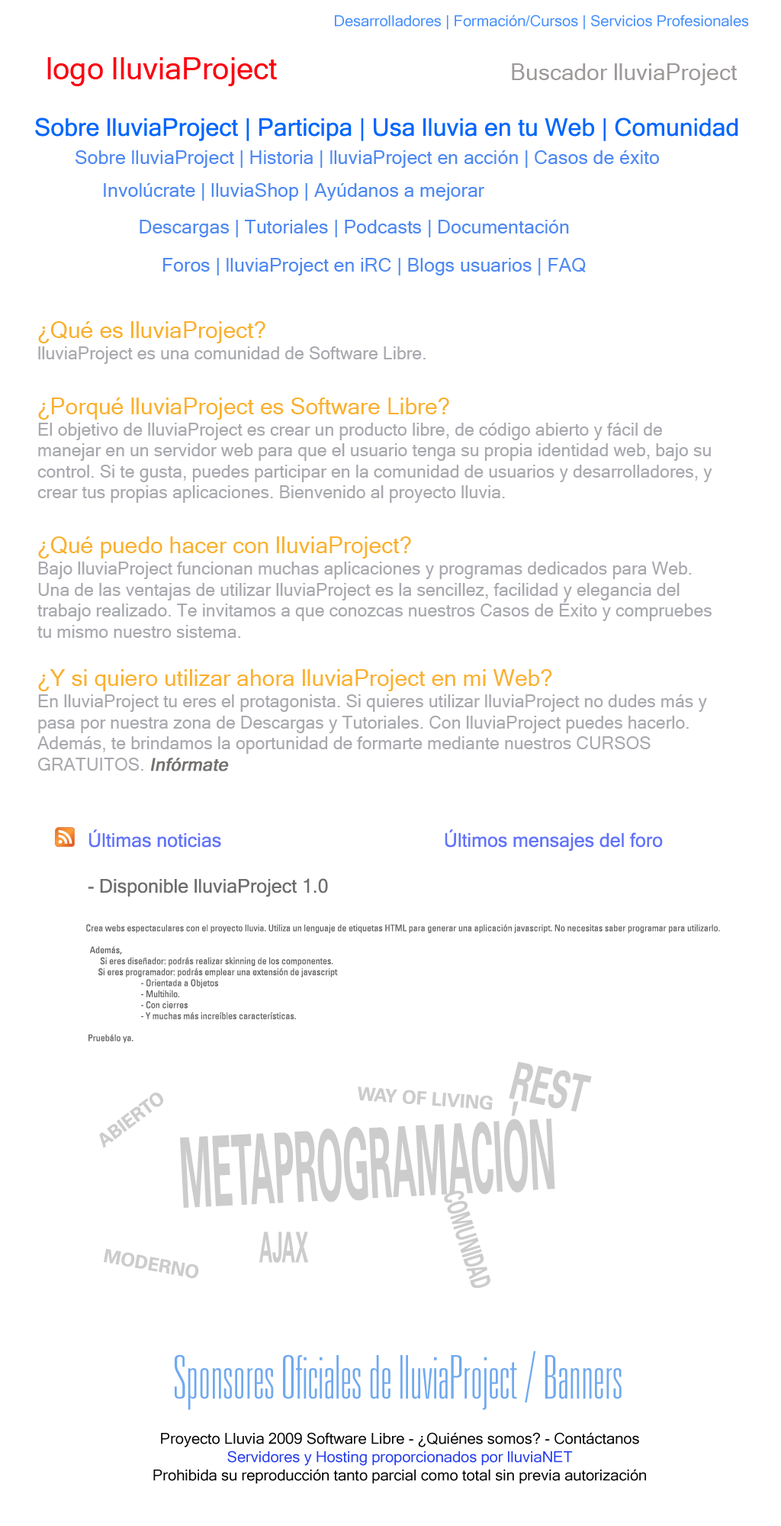
<style>
.page{position:relative;width:781px;height:1526px;background:#ffffff}
.page>*{position:absolute;margin:0}
.t1{font:15.3px "MicrosoftSansSerif";color:#428dfd}
.t2{font:30.5px "MicrosoftSansSerif";color:#fb020e}
.t3{font:22.9px "MicrosoftSansSerif";color:#9e9999}
.t4{font:24.4px "MicrosoftSansSerif";color:#0266fb}
.t5{font:19.1px "MicrosoftSansSerif";color:#4e88f1}
.t6{font:17.6px "MicrosoftSansSerif";color:#a8a9ae}
.t7{font:22.9px "MicrosoftSansSerif";color:#fab02f}
.t8{font:17.6px "MicrosoftSansSerif";color:#73716e;font-weight:bold;font-style:italic}
.t9{font:19.1px "MicrosoftSansSerif";color:#6e6e70}
.t10{font:19.1px "MicrosoftSansSerif";color:#6173f9}
.t11{font:9.2px "Univers-Condensed";color:#666666}
.t12{font:51.7px "Univers-Bold";color:#cccccc;scale:0.59 1}
.t13{font:18.3px "Univers-Bold";color:#cccccc}
.t14{font:97px "Univers-Bold";color:#cccccc;scale:0.35 1}
.t15{font:27.3px "Univers-Bold";color:#cccccc;scale:0.58 1}
.t16{font:41.9px "Univers-Bold";color:#cccccc;scale:0.44 1}
.t17{font:60.3px "Univers-ThinUltraCondensed";color:#70a9ef}
.t18{font:15.3px "MicrosoftSansSerif";color:#040404}
.t19{font:15.3px "MicrosoftSansSerif";color:#253ceb}
</style>
<div class="page">
<p class="t1" style="left:335px;top:14px;width:414px;height:16px">Desarrolladores | Formación/Cursos | Servicios Profesionales</p>
<p class="t2" style="left:47px;top:57px;width:230px;height:29px">logo lluviaProject</p>
<p class="t3" style="left:512px;top:63px;width:226px;height:22px">Buscador lluviaProject</p>
<p class="t4" style="left:35px;top:118px;width:704px;height:23px">Sobre lluviaProject | Participa | Usa lluvia en tu Web | Comunidad</p>
<p class="t5" style="left:76px;top:150px;width:583px;height:18px">Sobre lluviaProject | Historia | lluviaProject en acción | Casos de éxito</p>
<p class="t5" style="left:104px;top:183px;width:381px;height:18px">Involúcrate | lluviaShop | Ayúdanos a mejorar</p>
<p class="t5" style="left:140px;top:220px;width:429px;height:17px">Descargas | Tutoriales | Podcasts | Documentación</p>
<p class="t5" style="left:163px;top:258px;width:423px;height:17px">Foros | lluviaProject en iRC | Blogs usuarios | FAQ</p>
<p class="t6" style="left:37px;top:321px;width:676px;height:450px"><span class="t7">¿Qué es lluviaProject?<br></span>lluviaProject es una comunidad de Software Libre. <br><span class="t7"><br>¿Porqué lluviaProject es Software Libre?<br></span>El objetivo de lluviaProject es crear un producto libre, de código abierto y fácil de manejar en un servidor web para que el usuario tenga su propia identidad web, bajo su control. Si te gusta, puedes participar en la comunidad de usuarios y desarrolladores, y crear tus propias aplicaciones. Bienvenido al proyecto lluvia.<br><span class="t7"><br>¿Qué puedo hacer con lluviaProject?<br></span>Bajo lluviaProject funcionan muchas aplicaciones y programas dedicados para Web. Una de las ventajas de utilizar lluviaProject es la sencillez, facilidad y elegancia del trabajo realizado. Te invitamos a que conozcas nuestros Casos de Éxito y compruebes tu mismo nuestro sistema. <br><br><span class="t7">¿Y si quiero utilizar ahora lluviaProject en mi Web?<br></span>En lluviaProject tu eres el protagonista. Si quieres utilizar lluviaProject no dudes más y pasa por nuestra zona de Descargas y Tutoriales. Con lluviaProject puedes hacerlo. Además, te brindamos la oportunidad de formarte mediante nuestros CURSOS GRATUITOS. <span class="t8">Infórmate</span></p>
<p class="t9" style="left:88px;top:829px;width:240px;height:68px"><span class="t10">Últimas noticias<br><br></span>- Disponible lluviaProject 1.0</p>
<p class="t10" style="left:445px;top:829px;width:218px;height:23px">Últimos mensajes del foro</p>
<p class="t11" style="left:86px;top:924px;width:634px;height:119px">Crea webs espectaculares con el proyecto lluvia. Utiliza un lenguaje de etiquetas HTML para generar una aplicación javascript. No necesitas saber programar para utilizarlo.<br><br>  Además, <br>       Si eres diseñador: podrás realizar skinning de los componentes.<br>      Si eres programador: podrás emplear una extensión de javascript <br>  - Orientada a Objetos<br>  - Multihilo.<br>  - Con cierres<br>      - Y muchas más increíbles características.<br><br> Pruebálo ya.</p>
<p class="t12" style="left:509px;top:1061px;width:83px;height:51px;rotate:11deg">REST</p>
<p class="t13" style="left:99px;top:1093px;width:64px;height:55px;rotate:-37deg">ABIERTO</p>
<p class="t13" style="left:358px;top:1087px;width:135px;height:23px;rotate:4deg">WAY OF LIVING</p>
<p class="t14" style="left:180px;top:1101px;width:375px;height:107px;rotate:-3deg">METAPROGRAMACIÓN</p>
<p class="t15" style="left:444px;top:1190px;width:47px;height:99px;rotate:73deg">COMUNIDAD</p>
<p class="t16" style="left:259px;top:1232px;width:49px;height:31px">AJAX</p>
<p class="t13" style="left:104px;top:1248px;width:95px;height:31px;rotate:10deg">MODERNO</p>
<p class="t17" style="left:175px;top:1351px;width:447px;height:59px">Sponsores Oficiales de lluviaProject / Banners</p>
<p class="t18" style="left:153px;top:1432px;width:493px;height:52px;text-align:center">Proyecto Lluvia 2009 Software Libre - ¿Quiénes somos? - Contáctanos<br><span class="t19">Servidores y Hosting proporcionados por lluviaNET<br></span>Prohibida su reproducción tanto parcial como total sin previa autorización</p>
</div>
